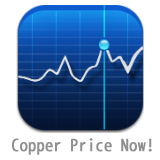
<style>
.page{position:relative;width:160px;height:160px;background:#ffffff}
.page>*{position:absolute;margin:0}
.t1{font:16px "AdobeFanHeitiStd-Bold";color:#909090;font-weight:bold}
</style>
<div class="page">
<p class="t1" style="left:12px;top:138px;width:140px;height:17px">Copper Price Now!</p>
</div>
